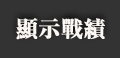
<style>
.page{position:relative;width:120px;height:58px;background:#333333}
.page>*{position:absolute;margin:0}
.t1{font:22px "RyuminPr6N-ExBold";color:#fbf8f3;font-weight:bold}
</style>
<div class="page">
<p class="t1" style="left:16px;top:18px;width:89px;height:22px">顯示戰績</p>
</div>
